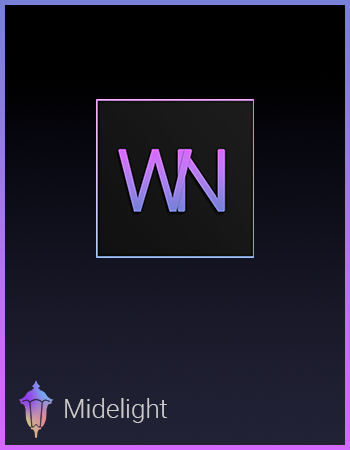
<style>
.page{position:relative;width:350px;height:450px}
.page>*{position:absolute;margin:0}
.t1{font:26px "Roboto-Light";color:#cccccc}
</style>
<div class="page">
<p class="t1" style="left:65px;top:398px;width:102px;height:25px">Midelight</p>
</div>
